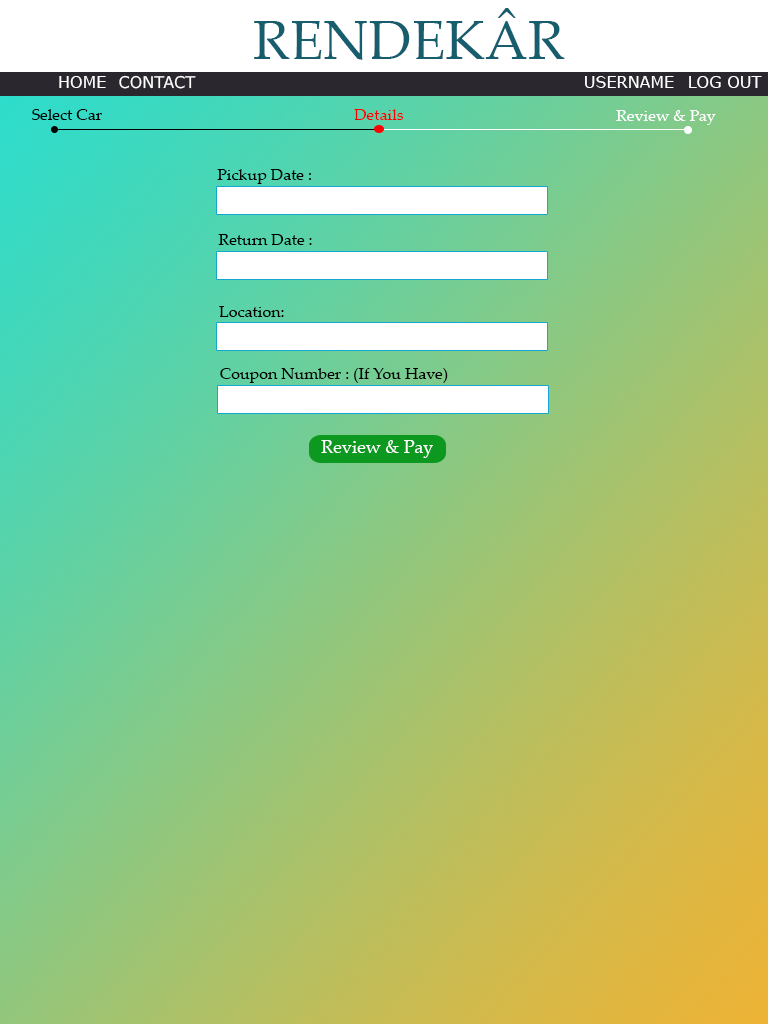
<style>
.page{position:relative;width:768px;height:1024px}
.page>*{position:absolute;margin:0}
.t1{font:55px "PalatinoLinotype-Roman";color:#165e6d}
.t2{font:16px "Verdana";color:#ffffff}
.t3{font:16px "PalatinoLinotype-Roman";color:#000000}
.t4{font:16px "PalatinoLinotype-Roman";color:#fc0101}
.t5{font:16px "PalatinoLinotype-Roman";color:#fefefe}
.t6{font:18px "PalatinoLinotype-Roman";color:#ffffff}
</style>
<div class="page">
<p class="t1" style="left:254px;top:8px;width:311px;height:52px">RENDEKÂR</p>
<p class="t2" style="left:59px;top:76px;width:47px;height:12px">HOME</p>
<p class="t2" style="left:119px;top:75px;width:77px;height:14px">CONTACT</p>
<p class="t2" style="left:585px;top:76px;width:89px;height:12px">USERNAME</p>
<p class="t2" style="left:689px;top:76px;width:73px;height:12px">LOG OUT</p>
<p class="t3" style="left:32px;top:109px;width:70px;height:11px">Select Car</p>
<p class="t4" style="left:354px;top:109px;width:50px;height:11px">Details</p>
<p class="t5" style="left:616px;top:110px;width:100px;height:15px">Review &amp; Pay</p>
<p class="t3" style="left:217px;top:169px;width:94px;height:15px">Pickup Date :</p>
<p class="t3" style="left:218px;top:234px;width:94px;height:11px">Return Date :</p>
<p class="t3" style="left:219px;top:306px;width:65px;height:11px">Location:</p>
<p class="t3" style="left:220px;top:368px;width:228px;height:15px">Coupon Number : (If You Have)</p>
<p class="t6" style="left:321px;top:440px;width:112px;height:18px">Review &amp; Pay</p>
</div>
